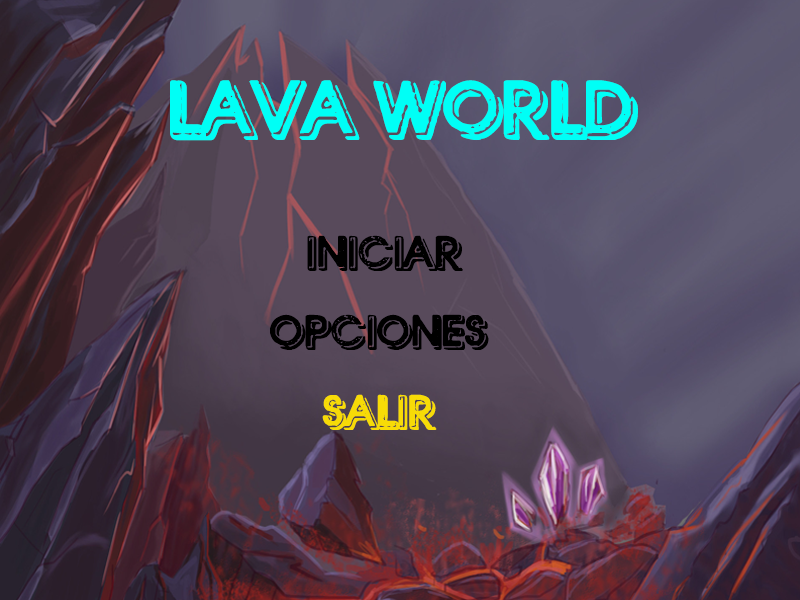
<style>
.page{position:relative;width:800px;height:600px}
.page>*{position:absolute;margin:0}
.t1{font:85px "Gameboard";color:#00fff6}
.t2{font:50px "Gameboard";color:#000000}
.t3{font:50px "Gameboard";color:#f7db07}
</style>
<div class="page">
<p class="t1" style="left:170px;top:80px;width:468px;height:61px">Lava world</p>
<p class="t2" style="left:307px;top:235px;width:156px;height:36px">iNICIAR</p>
<p class="t2" style="left:270px;top:314px;width:219px;height:36px">oPCIONES</p>
<p class="t3" style="left:322px;top:394px;width:115px;height:36px">sALIR</p>
</div>
